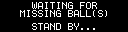
<style>
.page{position:relative;width:128px;height:32px;background:#000000}
.page>*{position:absolute;margin:0}
.t1{font:10px/8px "Terminal";color:#ffffff}
.t2{font:10px "Terminal";color:#ffffff}
</style>
<div class="page">
<p class="t1" style="left:20px;top:2px;width:87px;height:15px;text-align:center">WAITING FOR<br>MISSING BALL(S)</p>
<p class="t2" style="left:32px;top:23px;width:63px;height:7px">STAND BY...</p>
</div>
